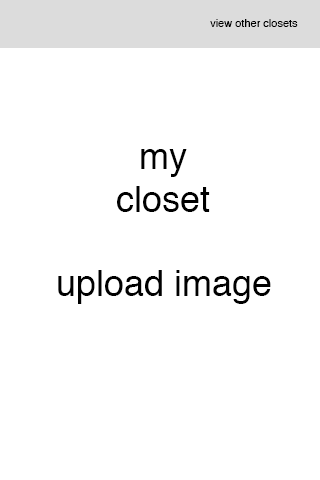
<style>
.page{position:relative;width:320px;height:480px;background:#ffffff}
.page>*{position:absolute;margin:0}
.t1{font:11px "Helvetica";color:#000000}
.t2{font:36px "Helvetica";color:#000000}
</style>
<div class="page">
<p class="t1" style="left:210px;top:19px;width:88px;height:8px">view other closets</p>
<p class="t2" style="left:117px;top:149px;width:93px;height:63px;text-align:center">my closet</p>
<p class="t2" style="left:58px;top:270px;width:213px;height:34px">upload image</p>
</div>
